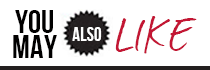
<style>
.page{position:relative;width:210px;height:70px;background:#ffffff}
.page>*{position:absolute;margin:0}
.t1{font:33.2px "BebasNeue";color:#010000;font-variant:small-caps}
.t2{font:81.5px "Journal";color:#c31634;font-variant:small-caps}
.t3{font:27.6px "BebasNeue";color:#ffffff;font-variant:small-caps}
</style>
<div class="page">
<p class="t1" style="left:13px;top:10px;width:44px;height:48px">YOU  MAY</p>
<p class="t2" style="left:115px;top:16px;width:82px;height:38px">like</p>
<p class="t3" style="left:72px;top:27px;width:30px;height:14px">also</p>
</div>
